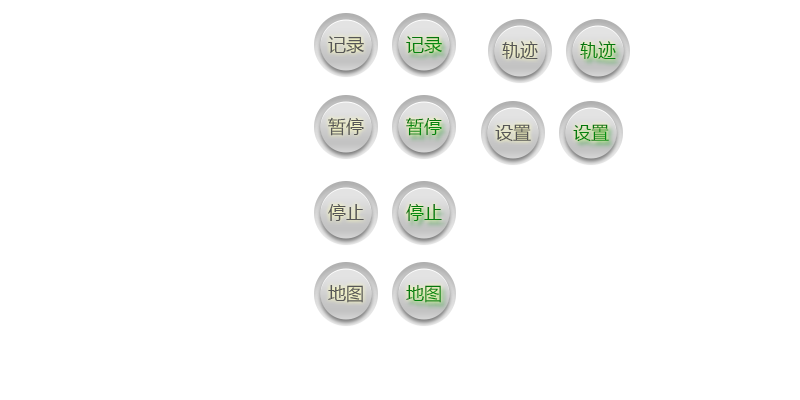
<style>
.page{position:relative;width:800px;height:400px;background:#ffffff}
.page>*{position:absolute;margin:0}
.t1{font:18px "MicrosoftYaHei";color:#565656}
.t2{font:18px "MicrosoftYaHei";color:#047d0d}
.t3{font:18px "MicrosoftYaHei";color:#047c0c}
.t4{font:18px "MicrosoftYaHei";color:#058610}
.t5{font:18px "MicrosoftYaHei";color:#04800e}
.t6{font:18px "MicrosoftYaHei";color:#04810e}
</style>
<div class="page">
<p class="t1" style="left:328px;top:36px;width:36px;height:18px">记录</p>
<p class="t2" style="left:406px;top:36px;width:36px;height:18px">记录</p>
<p class="t1" style="left:502px;top:41px;width:36px;height:18px">轨迹</p>
<p class="t3" style="left:580px;top:41px;width:36px;height:18px">轨迹</p>
<p class="t1" style="left:328px;top:117px;width:36px;height:19px">暂停</p>
<p class="t4" style="left:406px;top:117px;width:36px;height:19px">暂停</p>
<p class="t1" style="left:495px;top:124px;width:36px;height:17px">设置</p>
<p class="t5" style="left:573px;top:124px;width:36px;height:17px">设置</p>
<p class="t1" style="left:328px;top:204px;width:36px;height:17px">停止</p>
<p class="t6" style="left:406px;top:204px;width:36px;height:17px">停止</p>
<p class="t1" style="left:328px;top:285px;width:35px;height:18px">地图</p>
<p class="t2" style="left:406px;top:285px;width:35px;height:18px">地图</p>
</div>
